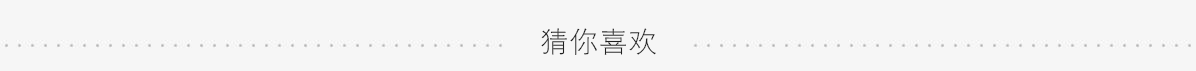
<style>
.page{position:relative;width:1196px;height:71px;background:#f6f6f6}
.page>*{position:absolute;margin:0}
.t1{font:28.4px "DenshanCSEG-Light-GB";letter-spacing:0.04em;color:#202020}
</style>
<div class="page">
<p class="t1" style="left:541px;top:28px;width:115px;height:27px">猜你喜欢</p>
</div>
